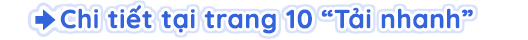
<style>
.page{position:relative;width:528px;height:40px;background:#ffffff}
.page>*{position:absolute;margin:0}
.t1{font:26px "Quicksand-Bold";color:#3264dc;font-weight:bold}
</style>
<div class="page">
<p class="t1" style="left:60px;top:5px;width:413px;height:29px">Chi tiết tại trang 10 “Tải nhanh”</p>
</div>
